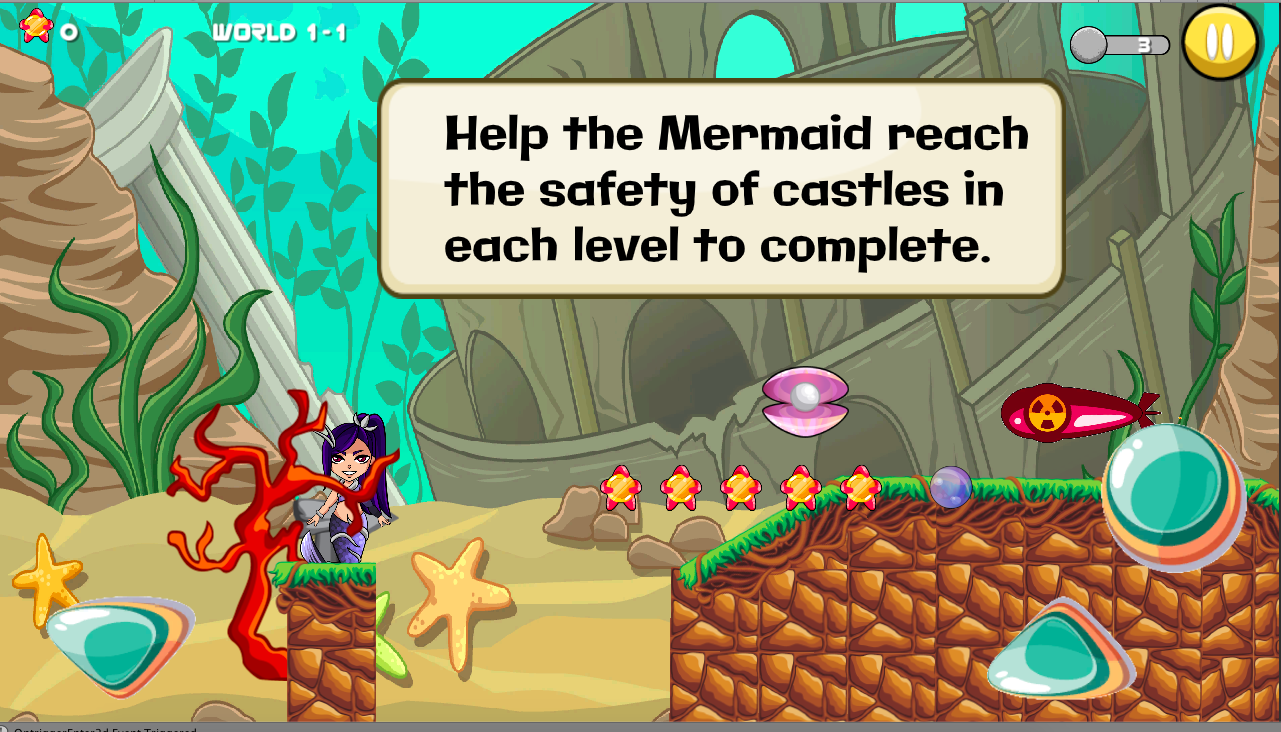
<style>
.page{position:relative;width:1281px;height:732px}
.page>*{position:absolute;margin:0}
.t1{font:46.5px "Galindo-Regular";color:#000000}
</style>
<div class="page">
<p class="t1" style="left:444px;top:114px;width:584px;height:159px">Help the Mermaid reach <br>the safety of castles in <br>each level to complete.</p>
</div>
